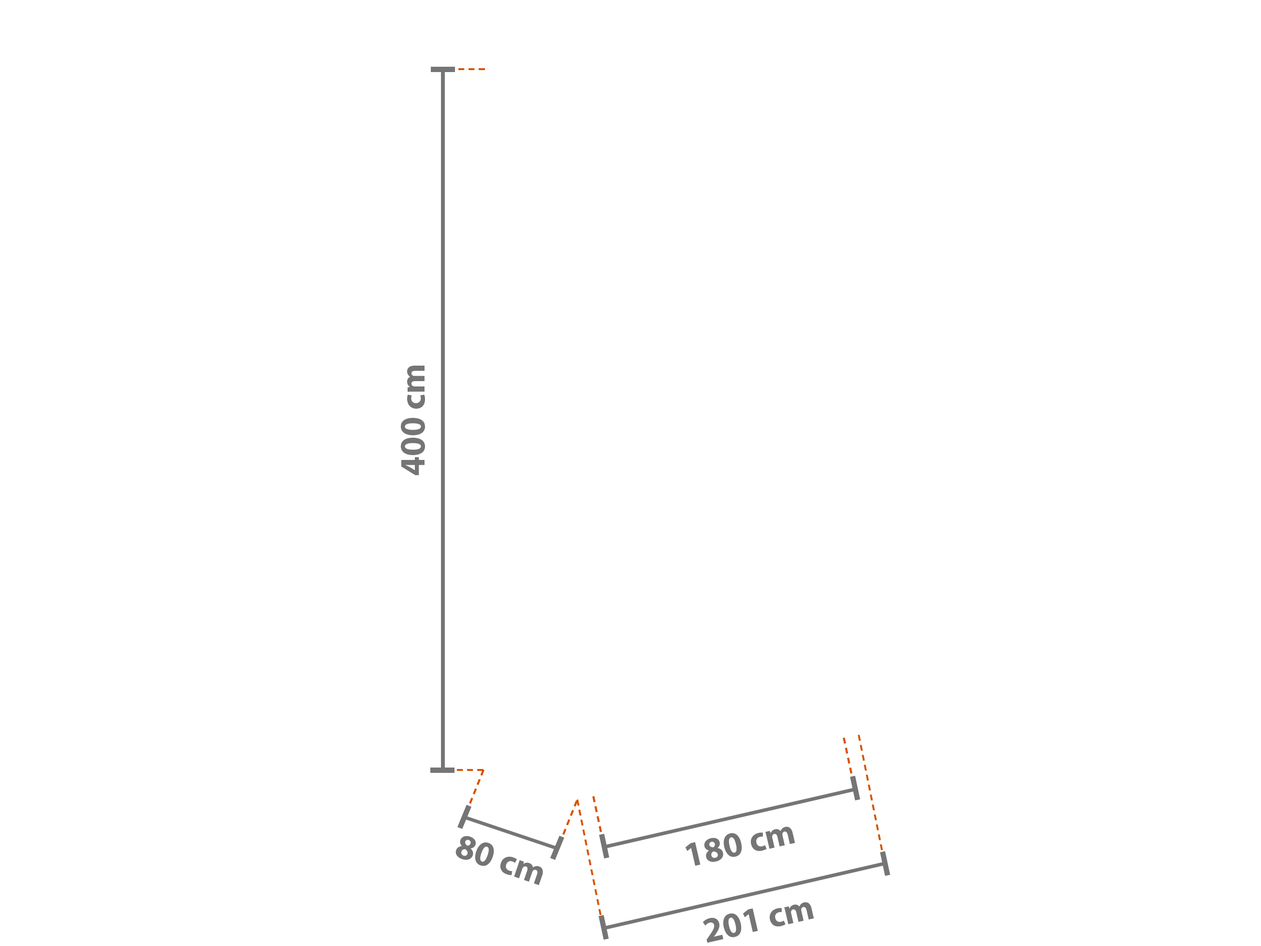
<style>
.page{position:relative;width:1261px;height:946px;background:#ffffff}
.page>*{position:absolute;margin:0}
.t1{font:35.5px "MyriadPro-Bold";color:#757575}
</style>
<div class="page">
<p class="t1" style="left:401px;top:366px;width:24px;height:109px;rotate:-90deg">400 cm</p>
<p class="t1" style="left:685px;top:826px;width:110px;height:39px;rotate:-13deg">180 cm</p>
<p class="t1" style="left:455px;top:835px;width:88px;height:50px;rotate:19deg">80 cm</p>
<p class="t1" style="left:702px;top:902px;width:112px;height:41px;rotate:-13deg">201 cm</p>
</div>
